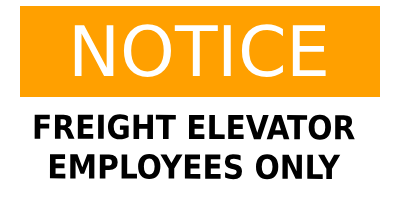
<style>
.page{position:relative;width:400px;height:200px;background:#ffffff}
.page>*{position:absolute;margin:0}
.t1{font:69.8px "DejaVuSans";color:#ffffff}
.t2{font:33px "DejaVuSansCondensed-Bold";color:#000000}
</style>
<div class="page">
<p class="t1" style="left:74px;top:24px;width:252px;height:53px">NOTICE</p>
<p class="t2" style="left:34px;top:114px;width:321px;height:66px;text-align:center">FREIGHT ELEVATOR<br>EMPLOYEES ONLY</p>
</div>
